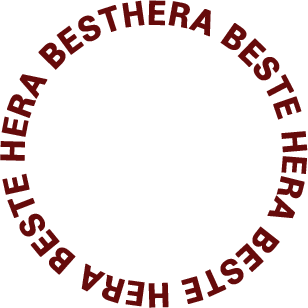
<style>
.page{position:relative;width:308px;height:308px;background:#ffffff}
.page>*{position:absolute;margin:0}
.t1{font:31px "ChosunBg";color:#660b0b;font-weight:bold}
</style>
<div class="page">
<p class="t1" style="left:0px;top:0px;width:308px;height:308px">HERA BESTE HERA BESTE HERA BESTE HERA BEST</p>
</div>
